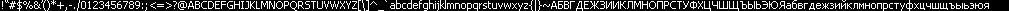
<style>
.page{position:relative;width:1009px;height:11px;background:#000000}
.page>*{position:absolute;margin:0}
.t1{font:11px "Tahoma";color:#ffffff}
</style>
<div class="page">
<p class="t1" style="left:2px;top:0px;width:987px;height:11px">!“#$%&amp;’()*+,-./0123456789:;&lt;=&gt;?@ABCDEFGHIJKLMNOPQRSTUVWXYZ[\]^_`abcdefghijklmnopqrstuvwxyz{|}~АБВГДЕЖЗИЙКЛМНОПРСТУФХЦЧШЩЪЫЬЭЮЯабвгдежзийклмнопрстуфхцчшщъыьэюя</p>
</div>
